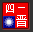
<style>
.page{position:relative;width:33px;height:32px;background:#f20000}
.page>*{position:absolute;margin:0}
.t1{font:10.4px "SimSun";color:#ffffff}
.t2{font:11.7px "SimSun";color:#ffffff}
</style>
<div class="page">
<p class="t1" style="left:6px;top:4px;width:19px;height:9px">四一</p>
<p class="t2" style="left:16px;top:15px;width:11px;height:12px">晋</p>
</div>
